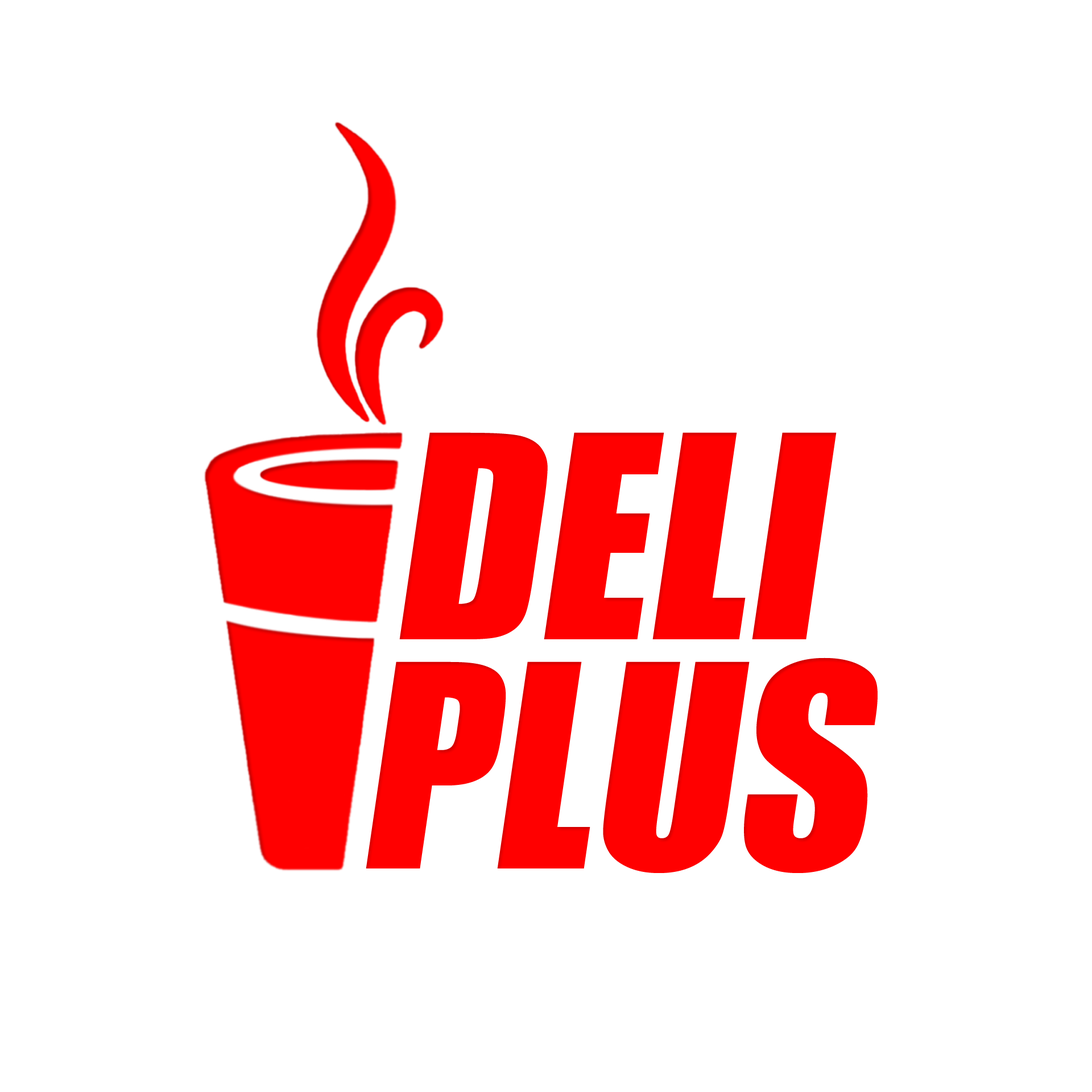
<style>
.page{position:relative;width:1092px;height:1092px;background:#ffffff}
.page>*{position:absolute;margin:0}
.t1{font:264px/231.7px "Impact";color:#ff0000}
</style>
<div class="page">
<p class="t1" style="left:366px;top:432px;width:512px;height:441px">DELI<br>PLUS</p>
</div>
